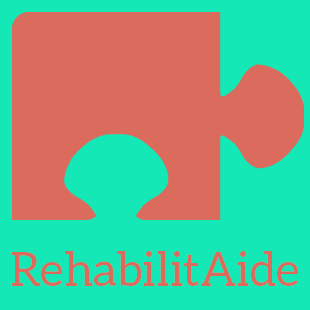
<style>
.page{position:relative;width:310px;height:310px;background:#14e8b6}
.page>*{position:absolute;margin:0}
.t1{font:46.9px "Aleo-Regular";color:#db6b5c}
</style>
<div class="page">
<p class="t1" style="left:11px;top:251px;width:287px;height:35px">RehabilitAide</p>
</div>
